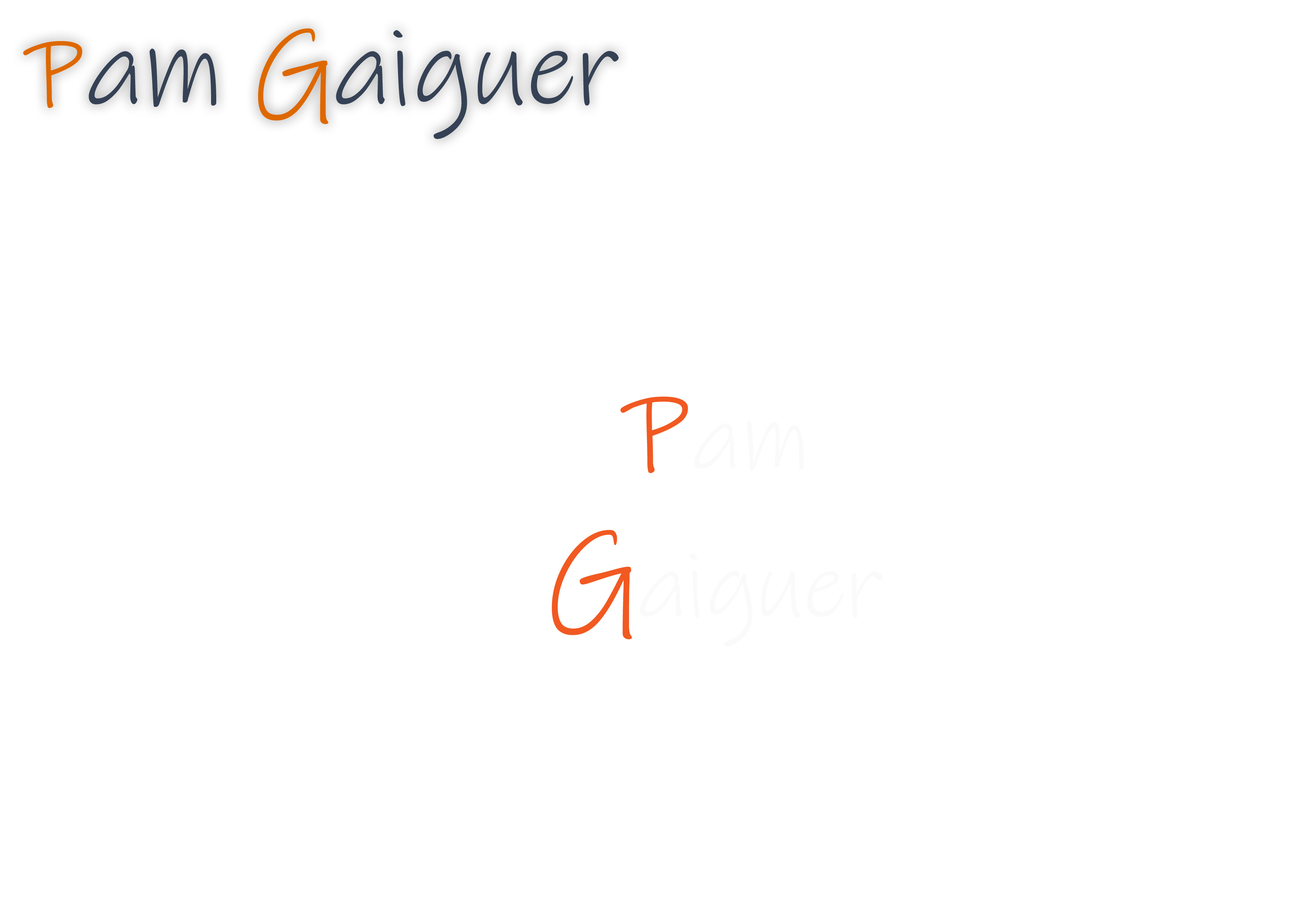
<style>
.page{position:relative;width:1299px;height:918px;background:#ffffff}
.page>*{position:absolute;margin:0}
.t1{font:108px "InkFree";color:#354154}
.t2{font:108px "InkFree";color:#de6800}
.t3{font:92.6px "InkFree";color:#fafafa}
.t4{font:123.4px "InkFree";color:#f15921}
</style>
<div class="page">
<p class="t1" style="left:23px;top:28px;width:596px;height:111px"><span class="t2">P</span>am <span class="t2">G</span>aiguer</p>
<p class="t3" style="left:552px;top:397px;width:330px;height:250px;text-align:center"><span class="t4">P</span>am<br><span class="t4">G</span>aiguer</p>
</div>
